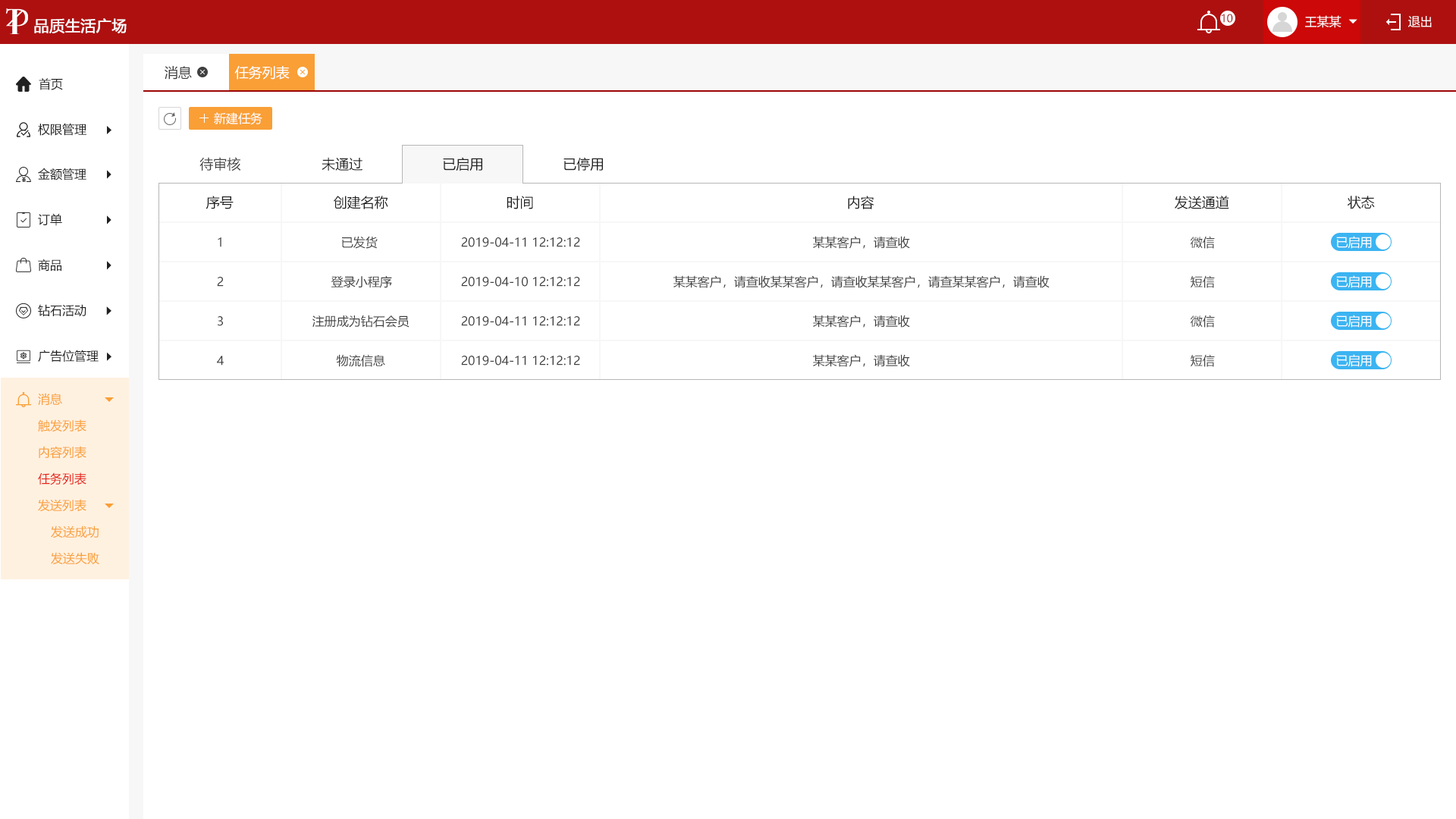
<style>
.page{position:relative;width:1456px;height:819px;background:#ffffff}
.page>*{position:absolute;margin:0}
.t1{font:10.6px "MicrosoftYaHei";color:#9c0606;text-transform:uppercase}
.t2{font:12.1px "MicrosoftYaHei";color:#ffffff;text-transform:uppercase}
.t3{font:15.2px "MicrosoftYaHei";color:#ffffff;text-transform:uppercase;font-weight:bold}
.t4{font:13.6px "MicrosoftYaHei";color:#404040;text-transform:uppercase}
.t5{font:13.6px "MicrosoftYaHei";color:#ffffff;text-transform:uppercase}
.t6{font:12.1px "MicrosoftYaHei";color:#202020;text-transform:uppercase}
.t7{font:13.6px "MicrosoftYaHei";color:#202020;text-transform:uppercase}
.t8{font:12.1px "MicrosoftYaHei";color:#404040;text-transform:uppercase}
.t9{font:12.1px "MicrosoftYaHei";color:#f99f36;text-transform:uppercase}
.t10{font:12.1px "MicrosoftYaHei";color:#e61f18;text-transform:uppercase}
</style>
<div class="page">
<p class="t1" style="left:1222px;top:14px;width:11px;height:9px">10</p>
<p class="t2" style="left:1305px;top:15px;width:36px;height:13px">王某某</p>
<p class="t2" style="left:1408px;top:16px;width:24px;height:11px">退出</p>
<p class="t3" style="left:34px;top:18px;width:93px;height:15px">品质生活广场</p>
<p class="t4" style="left:165px;top:66px;width:27px;height:14px">消息</p>
<p class="t5" style="left:234px;top:66px;width:56px;height:14px">任务列表</p>
<p class="t6" style="left:39px;top:78px;width:24px;height:12px">首页</p>
<p class="t2" style="left:214px;top:112px;width:48px;height:13px">新建任务</p>
<p class="t6" style="left:38px;top:123px;width:48px;height:13px">权限管理</p>
<p class="t4" style="left:199px;top:157px;width:42px;height:14px">待审核</p>
<p class="t7" style="left:322px;top:157px;width:40px;height:14px">未通过</p>
<p class="t7" style="left:443px;top:157px;width:39px;height:14px">已启用</p>
<p class="t7" style="left:563px;top:157px;width:40px;height:14px">已停用</p>
<p class="t6" style="left:38px;top:168px;width:48px;height:12px">金额管理</p>
<p class="t7" style="left:206px;top:196px;width:28px;height:13px">序号</p>
<p class="t7" style="left:334px;top:196px;width:54px;height:13px">创建名称</p>
<p class="t7" style="left:507px;top:196px;width:26px;height:13px">时间</p>
<p class="t7" style="left:848px;top:196px;width:26px;height:13px">内容</p>
<p class="t7" style="left:1175px;top:196px;width:54px;height:13px">发送通道</p>
<p class="t7" style="left:1347px;top:196px;width:28px;height:13px">状态</p>
<p class="t6" style="left:38px;top:213px;width:24px;height:13px">订单</p>
<p class="t8" style="left:218px;top:237px;width:3px;height:10px">1</p>
<p class="t8" style="left:342px;top:236px;width:36px;height:13px">已发货</p>
<p class="t8" style="left:461px;top:237px;width:119px;height:10px">2019-04-11 12:12:12</p>
<p class="t8" style="left:813px;top:236px;width:97px;height:13px">某某客户，请查收</p>
<p class="t8" style="left:1191px;top:236px;width:24px;height:13px">微信</p>
<p class="t2" style="left:1336px;top:236px;width:36px;height:13px">已启用</p>
<p class="t6" style="left:38px;top:259px;width:23px;height:12px">商品</p>
<p class="t8" style="left:217px;top:277px;width:7px;height:10px">2</p>
<p class="t8" style="left:331px;top:275px;width:61px;height:13px">登录小程序</p>
<p class="t8" style="left:461px;top:277px;width:119px;height:10px">2019-04-10 12:12:12</p>
<p class="t8" style="left:673px;top:275px;width:377px;height:13px">某某客户，请查收某某客户，请查收某某客户，请查某某客户，请查收</p>
<p class="t8" style="left:1191px;top:275px;width:24px;height:13px">短信</p>
<p class="t2" style="left:1336px;top:275px;width:36px;height:13px">已启用</p>
<p class="t6" style="left:38px;top:304px;width:48px;height:12px">钻石活动</p>
<p class="t8" style="left:218px;top:316px;width:5px;height:10px">3</p>
<p class="t8" style="left:312px;top:315px;width:97px;height:13px">注册成为钻石会员</p>
<p class="t8" style="left:461px;top:316px;width:119px;height:10px">2019-04-11 12:12:12</p>
<p class="t8" style="left:813px;top:315px;width:97px;height:13px">某某客户，请查收</p>
<p class="t8" style="left:1191px;top:315px;width:24px;height:13px">微信</p>
<p class="t2" style="left:1336px;top:315px;width:36px;height:13px">已启用</p>
<p class="t6" style="left:38px;top:350px;width:61px;height:12px">广告位管理</p>
<p class="t8" style="left:217px;top:356px;width:7px;height:10px">4</p>
<p class="t8" style="left:336px;top:354px;width:49px;height:13px">物流信息</p>
<p class="t8" style="left:461px;top:356px;width:119px;height:10px">2019-04-11 12:12:12</p>
<p class="t8" style="left:813px;top:354px;width:97px;height:13px">某某客户，请查收</p>
<p class="t8" style="left:1191px;top:354px;width:24px;height:13px">短信</p>
<p class="t2" style="left:1336px;top:354px;width:36px;height:13px">已启用</p>
<p class="t9" style="left:38px;top:393px;width:24px;height:12px">消息</p>
<p class="t9" style="left:38px;top:419px;width:48px;height:12px">触发列表</p>
<p class="t9" style="left:39px;top:446px;width:47px;height:13px">内容列表</p>
<p class="t10" style="left:38px;top:472px;width:48px;height:13px">任务列表</p>
<p class="t9" style="left:38px;top:499px;width:48px;height:12px">发送列表</p>
<p class="t9" style="left:51px;top:526px;width:48px;height:12px">发送成功</p>
<p class="t9" style="left:51px;top:552px;width:48px;height:13px">发送失败</p>
</div>
